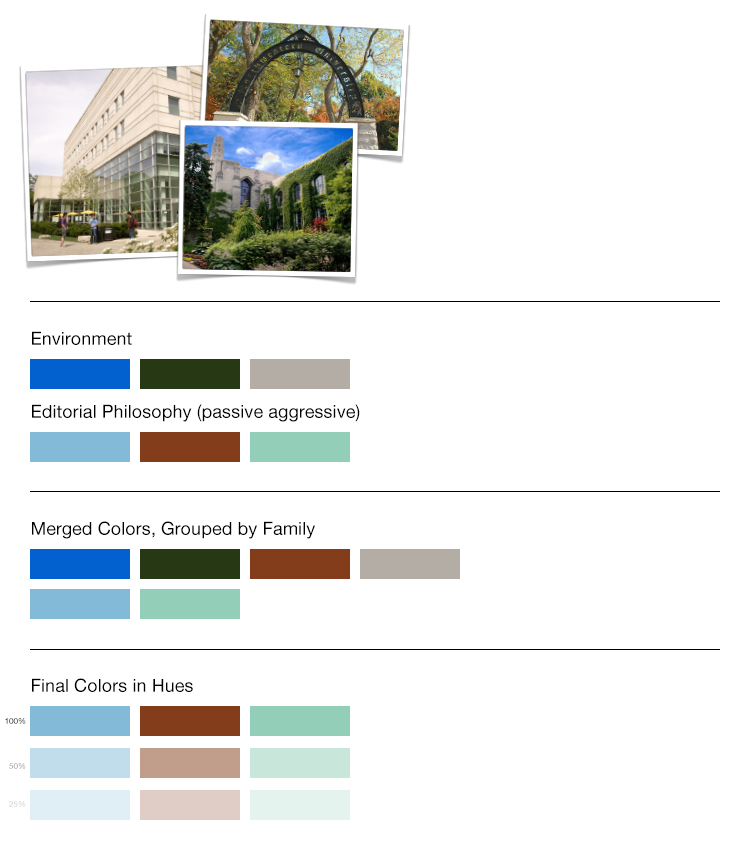
<style>
.page{position:relative;width:750px;height:850px;background:#ffffff}
.page>*{position:absolute;margin:0}
.t1{font:18px "HelveticaNeue";letter-spacing:0.005em;color:#000000}
.t2{font:8px "HelveticaNeue";letter-spacing:0.005em}
</style>
<div class="page">
<p class="t1" style="left:32px;top:331px;width:100px;height:14px">Environment</p>
<p class="t1" style="left:32px;top:404px;width:328px;height:18px">Editorial Philosophy (passive aggressive)</p>
<p class="t1" style="left:32px;top:521px;width:283px;height:18px">Merged Colors, Grouped by Family</p>
<p class="t1" style="left:32px;top:678px;width:161px;height:14px">Final Colors in Hues</p>
<p class="t2" style="left:5px;top:718px;width:21px;height:6px">100%</p>
<p class="t2" style="left:9px;top:763px;width:17px;height:6px">50%</p>
<p class="t2" style="left:9px;top:801px;width:17px;height:6px">25%</p>
</div>
